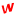
<style>
.page{position:relative;width:16px;height:16px;background:#ffffff}
.page>*{position:absolute;margin:0}
.t1{font:11px "MicrosoftYaHei-Bold";color:#ff0000}
</style>
<div class="page">
<p class="t1" style="left:1px;top:2px;width:13px;height:12px">W</p>
</div>
